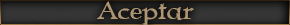
<style>
.page{position:relative;width:290px;height:25px}
.page>*{position:absolute;margin:0}
.t1{font:26.3px "Immortal";color:#ad9573}
</style>
<div class="page">
<p class="t1" style="left:97px;top:1px;width:97px;height:26px">Aceptar</p>
</div>
